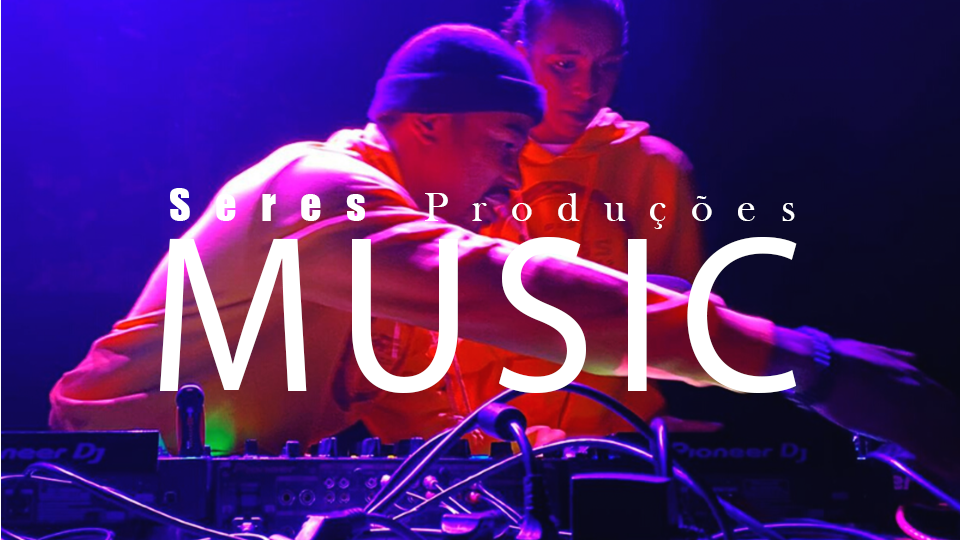
<style>
.page{position:relative;width:960px;height:540px}
.page>*{position:absolute;margin:0}
.t1{font:42px "BaskOldFace";letter-spacing:0.58em;color:#ffffff}
.t2{font:42px "Impact";letter-spacing:0.58em;color:#ffffff}
.t3{font:226.1px "MyriadPro-Regular";letter-spacing:0.08em;color:#ffffff;scale:0.94 1}
</style>
<div class="page">
<p class="t1" style="left:170px;top:188px;width:625px;height:41px"><span class="t2">Seres </span>Produções</p>
<p class="t3" style="left:160px;top:237px;width:637px;height:156px">MUSIC</p>
</div>
